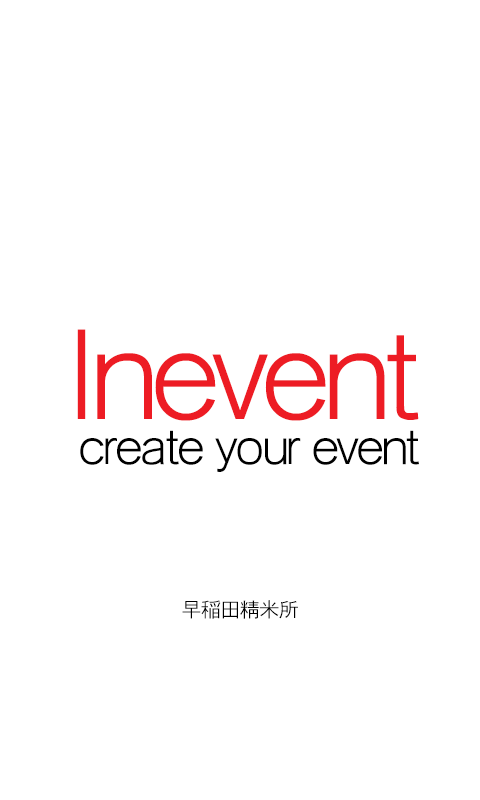
<style>
.page{position:relative;width:480px;height:800px;background:#ffffff}
.page>*{position:absolute;margin:0}
.t1{font:125px "Haansoft-Dotum";letter-spacing:-0.075em;color:#ed1c24}
.t2{font:50px "Haansoft-Dotum";letter-spacing:-0.075em;color:#000000}
.t3{font:20.8px "Haansoft-Dotum";letter-spacing:-0.075em;color:#000000}
</style>
<div class="page">
<p class="t1" style="left:77px;top:329px;width:342px;height:92px">Inevent</p>
<p class="t2" style="left:80px;top:430px;width:339px;height:42px">create your event</p>
<p class="t3" style="left:182px;top:600px;width:116px;height:19px">早稲田精米所</p>
</div>
